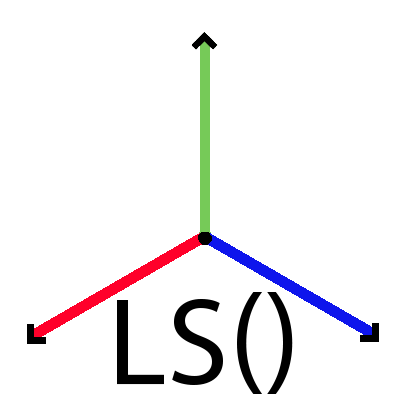
<style>
.page{position:relative;width:400px;height:400px;background:#ffffff}
.page>*{position:absolute;margin:0}
.t1{font:125px "MyriadPro-Regular";color:#000000}
</style>
<div class="page">
<p class="t1" style="left:117px;top:292px;width:176px;height:102px">LS()</p>
</div>
